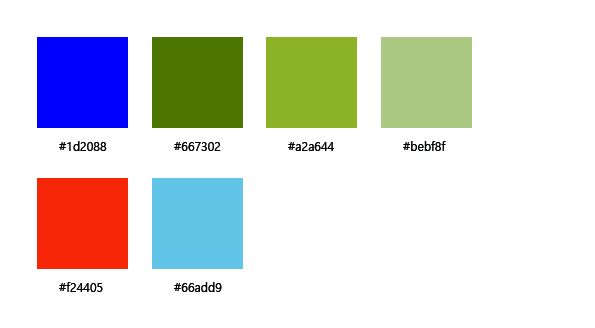
<style>
.page{position:relative;width:595px;height:328px;background:#ffffff}
.page>*{position:absolute;margin:0}
.t1{font:12px "MalgunGothic";color:#040606}
</style>
<div class="page">
<p class="t1" style="left:59px;top:141px;width:48px;height:10px">#1d2088</p>
<p class="t1" style="left:174px;top:142px;width:47px;height:9px">#667302</p>
<p class="t1" style="left:288px;top:142px;width:46px;height:9px">#a2a644</p>
<p class="t1" style="left:403px;top:141px;width:43px;height:10px">#bebf8f</p>
<p class="t1" style="left:59px;top:282px;width:44px;height:10px">#f24405</p>
<p class="t1" style="left:174px;top:282px;width:48px;height:10px">#66add9</p>
</div>
